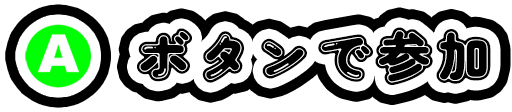
<style>
.page{position:relative;width:512px;height:112px;background:#ffffff}
.page>*{position:absolute;margin:0}
.t1{font:60px "DokiDokiFantasia";color:#000000}
</style>
<div class="page">
<p class="t1" style="left:137px;top:27px;width:354px;height:58px">ボタンで参加</p>
</div>
